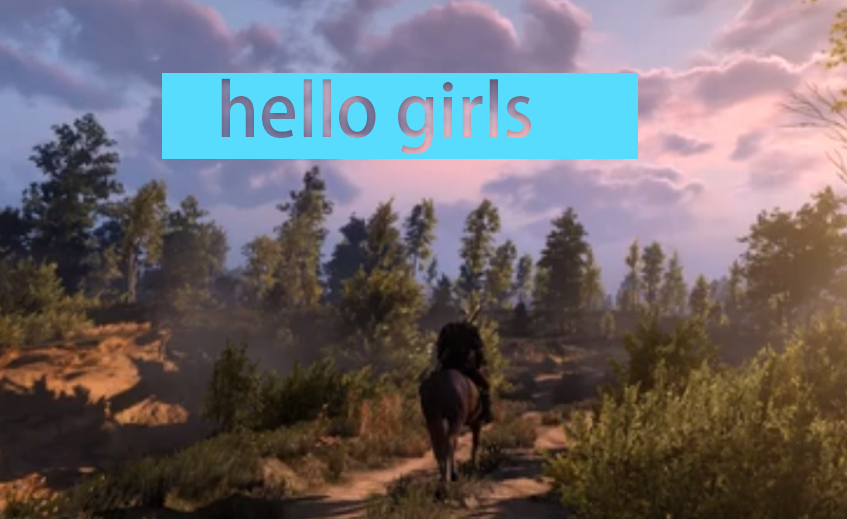
<style>
.page{position:relative;width:847px;height:519px}
.page>*{position:absolute;margin:0}
.t1{font:72px "AdobeHeitiStd-Regular"}
</style>
<div class="page">
<p class="t1" style="left:221px;top:78px;width:310px;height:76px">hello girls</p>
</div>
